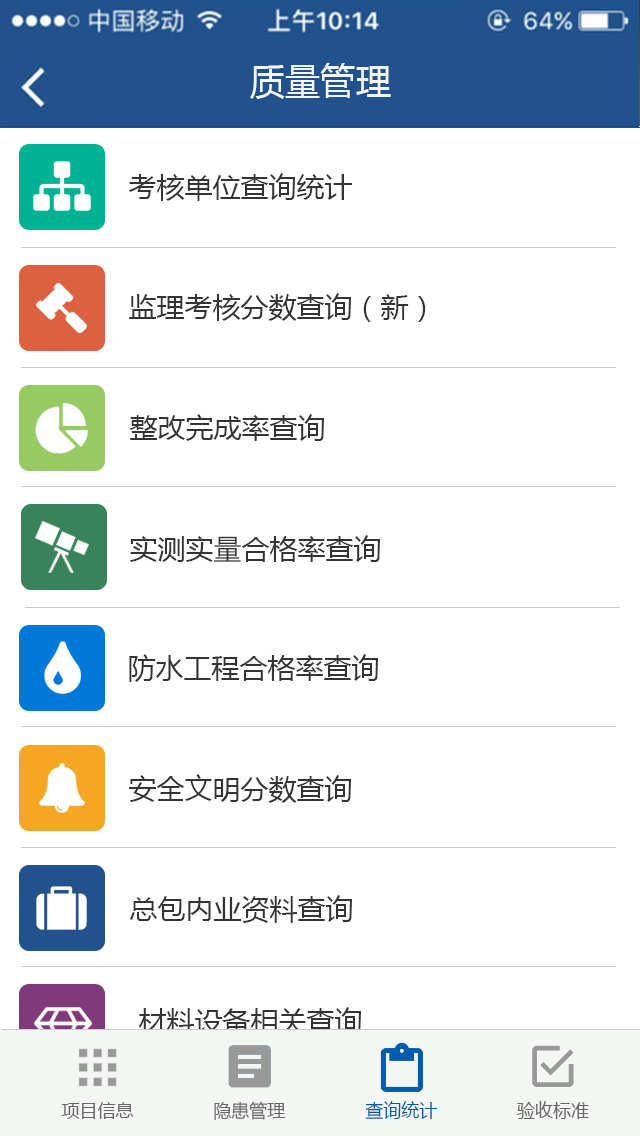
<style>
.page{position:relative;width:640px;height:1136px;background:#ffffff}
.page>*{position:absolute;margin:0}
.t1{font:36px "MicrosoftYaHei";color:#f3f6f3}
.t2{font:28px "MicrosoftYaHei";color:#333333}
.t3{font:18px "MicrosoftYaHei";color:#666666}
.t4{font:18px "MicrosoftYaHei";color:#005bac}
</style>
<div class="page">
<p class="t1" style="left:250px;top:63px;width:141px;height:36px">质量管理</p>
<p class="t2" style="left:128px;top:173px;width:224px;height:28px">考核单位查询统计</p>
<p class="t2" style="left:129px;top:293px;width:297px;height:29px">监理考核分数查询（新）</p>
<p class="t2" style="left:129px;top:414px;width:195px;height:27px">整改完成率查询</p>
<p class="t2" style="left:130px;top:535px;width:250px;height:27px">实测实量合格率查询</p>
<p class="t2" style="left:129px;top:654px;width:249px;height:28px">防水工程合格率查询</p>
<p class="t2" style="left:129px;top:774px;width:222px;height:29px">安全文明分数查询</p>
<p class="t2" style="left:130px;top:895px;width:222px;height:28px">总包内业资料查询</p>
<p class="t2" style="left:139px;top:1007px;width:222px;height:28px">材料设备相关查询</p>
<p class="t3" style="left:61px;top:1101px;width:528px;height:19px">项目信息               隐患管理               <span class="t4">查询统计</span>               验收标准</p>
</div>
